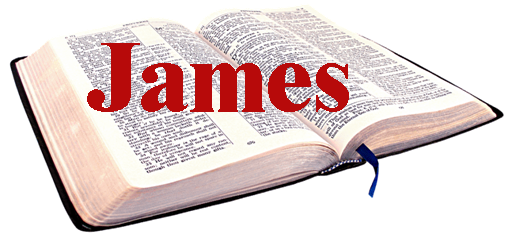
<style>
.page{position:relative;width:513px;height:239px;background:#ffffff}
.page>*{position:absolute;margin:0}
.t1{font:99.6px "TimesNewRomanMT-ExtraBold";color:#b70a0a}
</style>
<div class="page">
<p class="t1" style="left:87px;top:43px;width:262px;height:69px">James</p>
</div>
